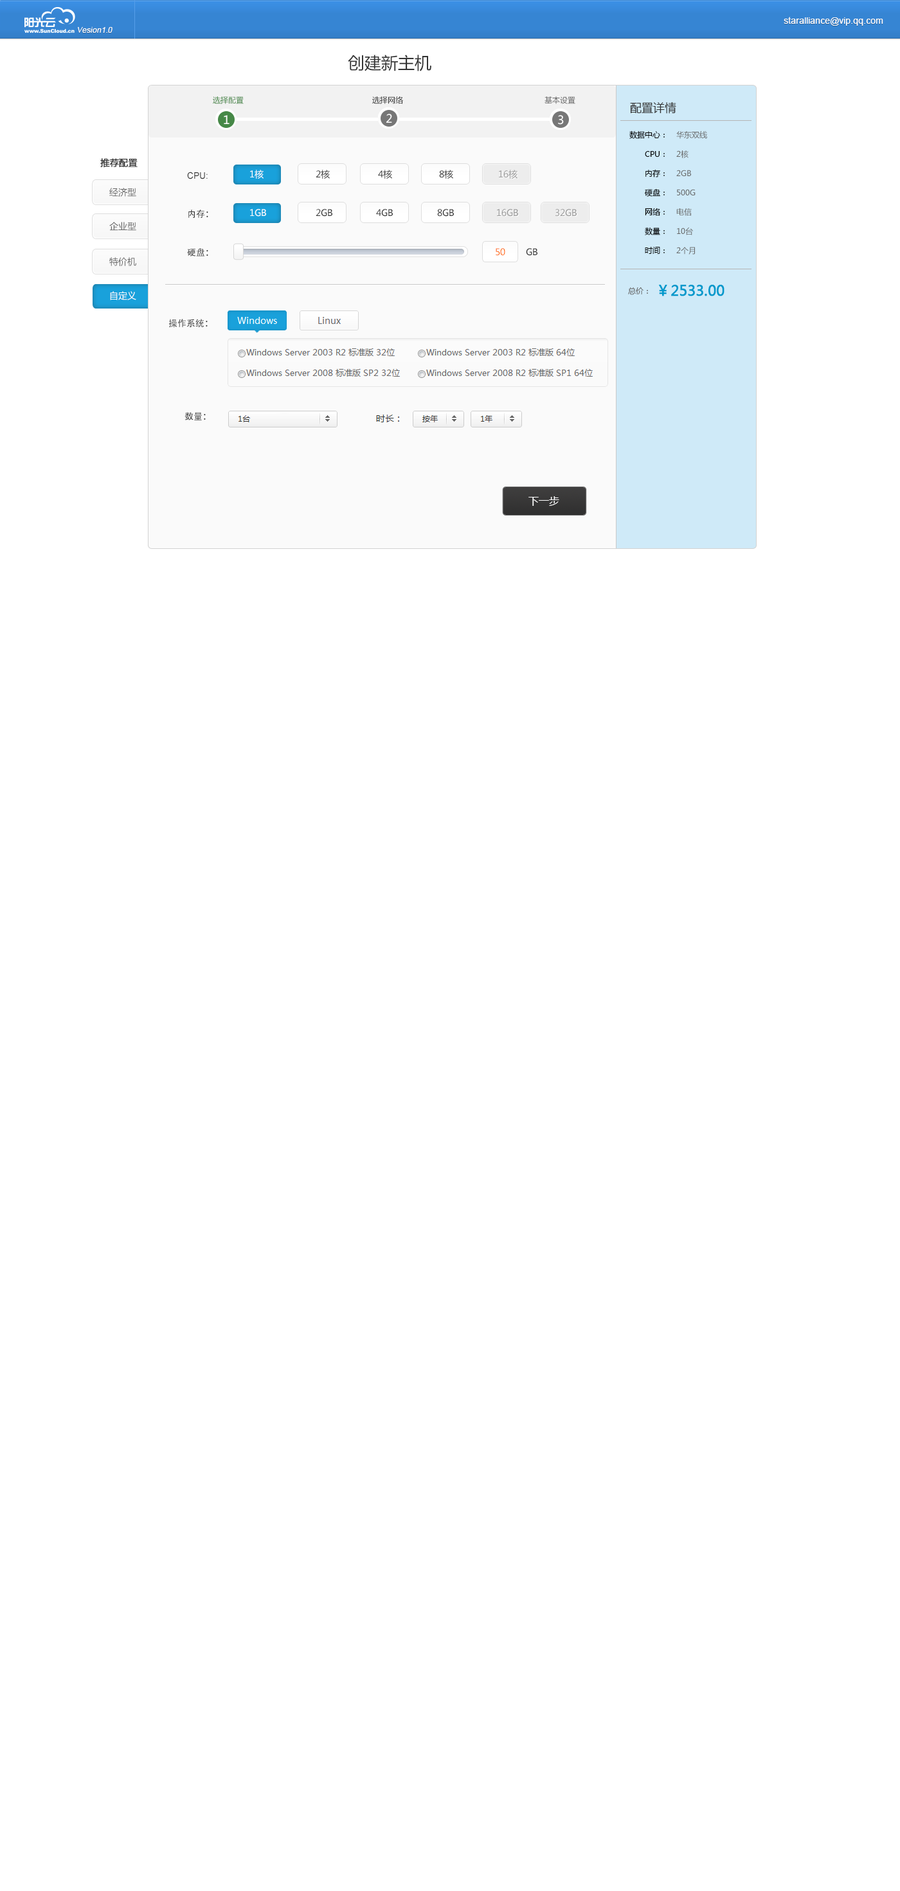
<style>
.page{position:relative;width:900px;height:1891px;background:#ffffff}
.page>*{position:absolute;margin:0}
.t1{font:9px "ArialMT";color:#ffffff}
.t2{font:7.7px "ArialMT";color:#ffffff;font-style:italic}
.t3{font:16.7px "MicrosoftYaHei";color:#333333}
.t4{font:7.7px "MicrosoftYaHei";color:#468847}
.t5{font:7.7px "MicrosoftYaHei";color:#303030}
.t6{font:7.7px "MicrosoftYaHei";color:#666666}
.t7{font:11.6px "MicrosoftYaHei";color:#333333}
.t8{font:11.6px "MicrosoftYaHei";color:#ffffff}
.t9{font:7.7px/19.3px "MicrosoftYaHei";color:#000000}
.t10{font:7.7px/19.3px "MicrosoftYaHei";color:#666666}
.t11{font:9px "MicrosoftYaHei";color:#333333;font-weight:bold}
.t12{font:9px/38.6px "AdobeHeitiStd-Regular";color:#333333}
.t13{font:9px/38.6px "ArialMT";color:#333333}
.t14{font:9px "MicrosoftYaHei";color:#ffffff}
.t15{font:9px "MicrosoftYaHei";color:#333333}
.t16{font:9px "MicrosoftYaHei";color:#999999}
.t17{font:9px "MicrosoftYaHei";color:#666666}
.t18{font:9px "MicrosoftYaHei";color:#ff6600}
.t19{font:14.1px "MicrosoftYaHei";color:#0099cc;font-weight:bold}
.t20{font:9px "AdobeHeitiStd-Regular";color:#333333}
.t21{font:10.3px "MicrosoftYaHei";color:#ffffff}
</style>
<div class="page">
<p class="t1" style="left:784px;top:17px;width:99px;height:9px">staralliance@vip.qq.com</p>
<p class="t2" style="left:78px;top:27px;width:35px;height:6px">Vesion1.0</p>
<p class="t3" style="left:348px;top:55px;width:83px;height:16px">创建新主机</p>
<p class="t4" style="left:213px;top:96px;width:362px;height:8px">选择配置                                                  <span class="t5">选择网络                                                       </span><span class="t6">基本设置</span></p>
<p class="t7" style="left:630px;top:102px;width:46px;height:12px">配置详情</p>
<p class="t8" style="left:386px;top:114px;width:6px;height:9px">2</p>
<p class="t8" style="left:386px;top:114px;width:6px;height:9px">2</p>
<p class="t8" style="left:224px;top:115px;width:6px;height:9px">1</p>
<p class="t8" style="left:558px;top:115px;width:6px;height:10px">3</p>
<p class="t8" style="left:558px;top:115px;width:6px;height:10px">3</p>
<p class="t9" style="left:629px;top:130px;width:36px;height:124px;text-align:right">数据中心：<br> CPU：<br>内存：<br>硬盘：<br>网络：<br>数量：<br>时间：</p>
<p class="t10" style="left:676px;top:130px;width:31px;height:125px">华东双线<br>2核<br>2GB<br>500G<br>电信<br>10台<br>2个月</p>
<p class="t11" style="left:100px;top:158px;width:38px;height:10px">推荐配置</p>
<p class="t12" style="left:187px;top:172px;width:21px;height:84px"><span class="t13">CPU:<br></span>内存：<br>硬盘：</p>
<p class="t14" style="left:250px;top:170px;width:14px;height:9px">1核</p>
<p class="t15" style="left:316px;top:170px;width:14px;height:9px">2核</p>
<p class="t15" style="left:378px;top:170px;width:14px;height:9px">4核</p>
<p class="t15" style="left:439px;top:170px;width:14px;height:9px">8核</p>
<p class="t16" style="left:499px;top:170px;width:19px;height:9px">16核</p>
<p class="t17" style="left:109px;top:188px;width:27px;height:9px">经济型</p>
<p class="t14" style="left:250px;top:209px;width:16px;height:8px">1GB</p>
<p class="t15" style="left:316px;top:209px;width:16px;height:8px">2GB</p>
<p class="t15" style="left:376px;top:209px;width:17px;height:8px">4GB</p>
<p class="t15" style="left:437px;top:209px;width:17px;height:8px">8GB</p>
<p class="t16" style="left:497px;top:209px;width:21px;height:8px">16GB</p>
<p class="t16" style="left:555px;top:209px;width:22px;height:8px">32GB</p>
<p class="t17" style="left:109px;top:222px;width:27px;height:9px">企业型</p>
<p class="t17" style="left:109px;top:257px;width:27px;height:9px">特价机</p>
<p class="t18" style="left:496px;top:248px;width:9px;height:8px">50</p>
<p class="t15" style="left:526px;top:248px;width:11px;height:8px">GB</p>
<p class="t14" style="left:110px;top:291px;width:26px;height:9px">自定义</p>
<p class="t6" style="left:628px;top:287px;width:20px;height:8px">总价：</p>
<p class="t19" style="left:659px;top:285px;width:65px;height:11px">￥2533.00</p>
<p class="t20" style="left:168px;top:319px;width:40px;height:9px">操作系统：</p>
<p class="t20" style="left:184px;top:412px;width:22px;height:8px">数量：</p>
<p class="t21" style="left:528px;top:496px;width:31px;height:10px">下一步</p>
</div>
